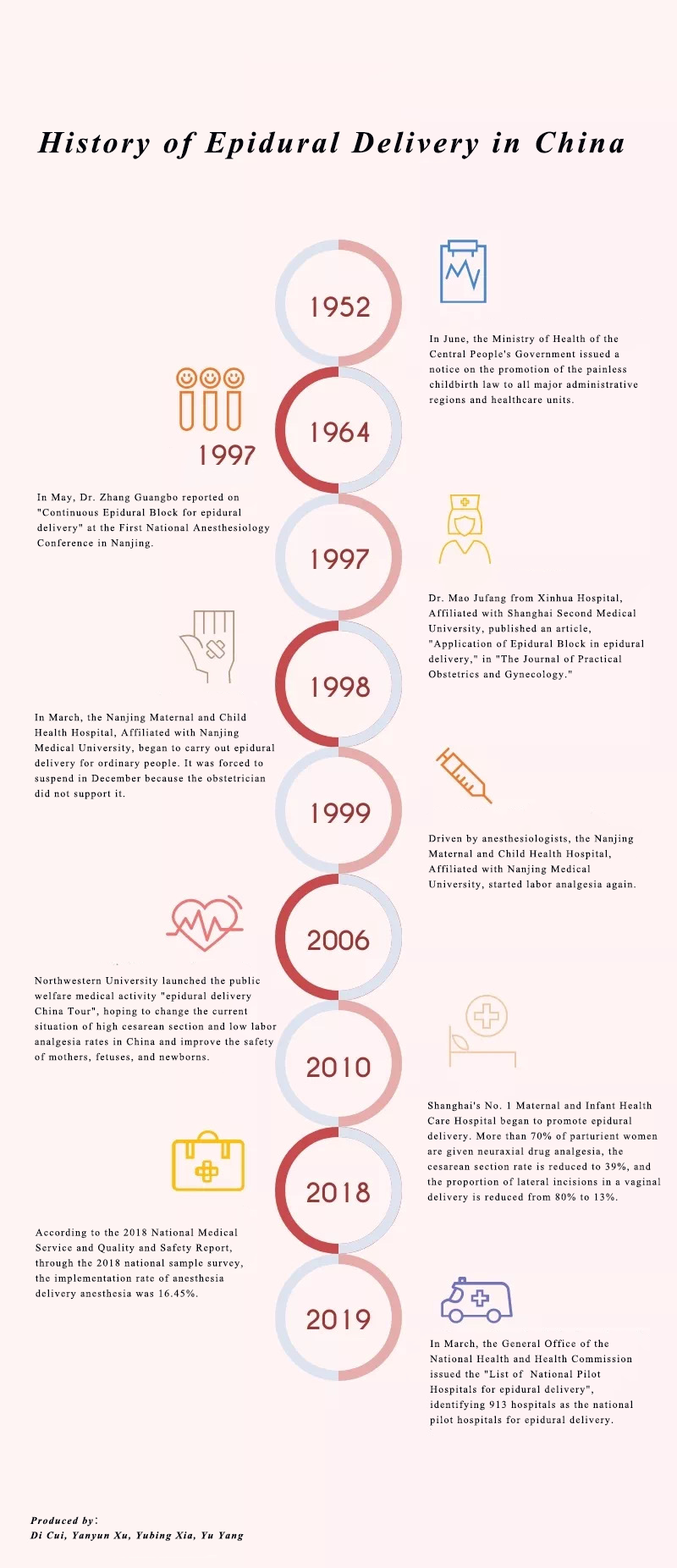
<style>
.page{position:relative;width:677px;height:1568px;background:#fef4f3}
.page>*{position:absolute;margin:0}
.t1{font:30.5px "TimesNewRomanPS-BoldItalicMT";letter-spacing:0.1em;color:#02030b}
.t2{font:10.2px/15.2px "TimesNewRomanPSMT";letter-spacing:0.1em;color:#02030b}
.t3{font:10.2px/15.2px "TimesNewRomanPS-BoldItalicMT";letter-spacing:0.1em;color:#02030b}
.t4{font:10.2px/15.2px "AdobeHeitiStd-Regular";letter-spacing:0.1em;color:#02030b}
</style>
<div class="page">
<p class="t1" style="left:36px;top:131px;width:588px;height:28px">History of Epidural Delivery in China</p>
<p class="t2" style="left:429px;top:334px;width:209px;height:72px">In June, the Ministry of Health of the Central People's Government issued a notice on the promotion of the painless childbirth law to all major administrative regions and healthcare units.</p>
<p class="t2" style="left:37px;top:493px;width:233px;height:56px">In May, Dr. Zhang Guangbo reported on "Continuous Epidural Block for epidural delivery" at the First National Anesthesiology Conference in Nanjing.</p>
<p class="t2" style="left:428px;top:594px;width:216px;height:86px">Dr. Mao Jufang from Xinhua Hospital, Affiliated with Shanghai Second Medical University, published an article, "Application of Epidural Block in epidural delivery," in "The Journal of Practical Obstetrics and Gynecology."</p>
<p class="t2" style="left:35px;top:713px;width:240px;height:86px">In March, the Nanjing Maternal and Child Health Hospital, Affiliated with Nanjing Medical University, began to carry out epidural delivery for ordinary people. It was forced to suspend in December because the obstetrician did not support it.</p>
<p class="t2" style="left:428px;top:834px;width:208px;height:56px">Driven by anesthesiologists, the Nanjing Maternal and Child Health Hospital, Affiliated with Nanjing Medical University, started labor analgesia again.</p>
<p class="t2" style="left:34px;top:976px;width:243px;height:87px">Northwestern University launched the public welfare medical activity "epidural delivery China Tour", hoping to change the current situation of high cesarean section and low labor analgesia rates in China and improve the safety of mothers, fetuses, and newborns.</p>
<p class="t2" style="left:428px;top:1101px;width:233px;height:102px">Shanghai's No. 1 Maternal and Infant Health Care Hospital began to promote epidural delivery. More than 70% of parturient women are given neuraxial drug analgesia, the cesarean section rate is reduced to 39%, and the proportion of lateral incisions in a vaginal delivery is reduced from 80% to 13%.</p>
<p class="t2" style="left:35px;top:1228px;width:208px;height:72px">According to the 2018 National Medical Service and Quality and Safety Report, through the 2018 national sample survey, the implementation rate of anesthesia delivery anesthesia was 16.45%.</p>
<p class="t2" style="left:430px;top:1339px;width:203px;height:87px">In March, the General Office of the National Health and Health Commission issued the "List of  National Pilot Hospitals for epidural delivery", identifying 913 hospitals as the national pilot hospitals for epidural delivery.</p>
<p class="t3" style="left:30px;top:1516px;width:214px;height:25px">Produced by<span class="t4">：<br></span>Di Cui, Yanyun Xu, Yubing Xia, Yu Yang</p>
</div>
